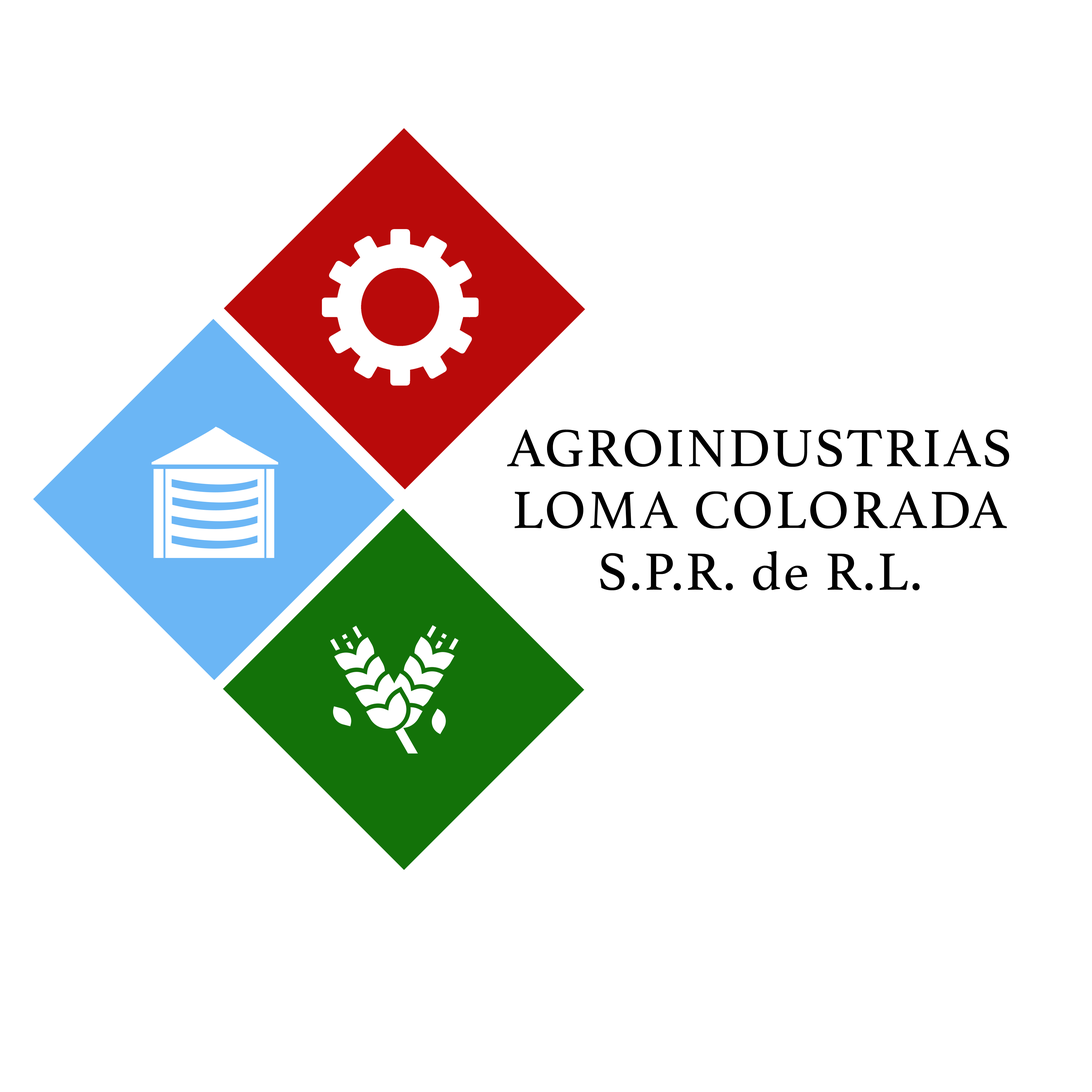
<style>
.page{position:relative;width:1092px;height:1092px;background:#ffffff}
.page>*{position:absolute;margin:0}
.t1{font:55.1px/61.7px "Athelas-Regular";letter-spacing:0.04em;color:#000000}
</style>
<div class="page">
<p class="t1" style="left:507px;top:430px;width:502px;height:160px;text-align:center">AGROINDUSTRIAS<br>LOMA COLORADA<br>S.P.R. de R.L.</p>
</div>
